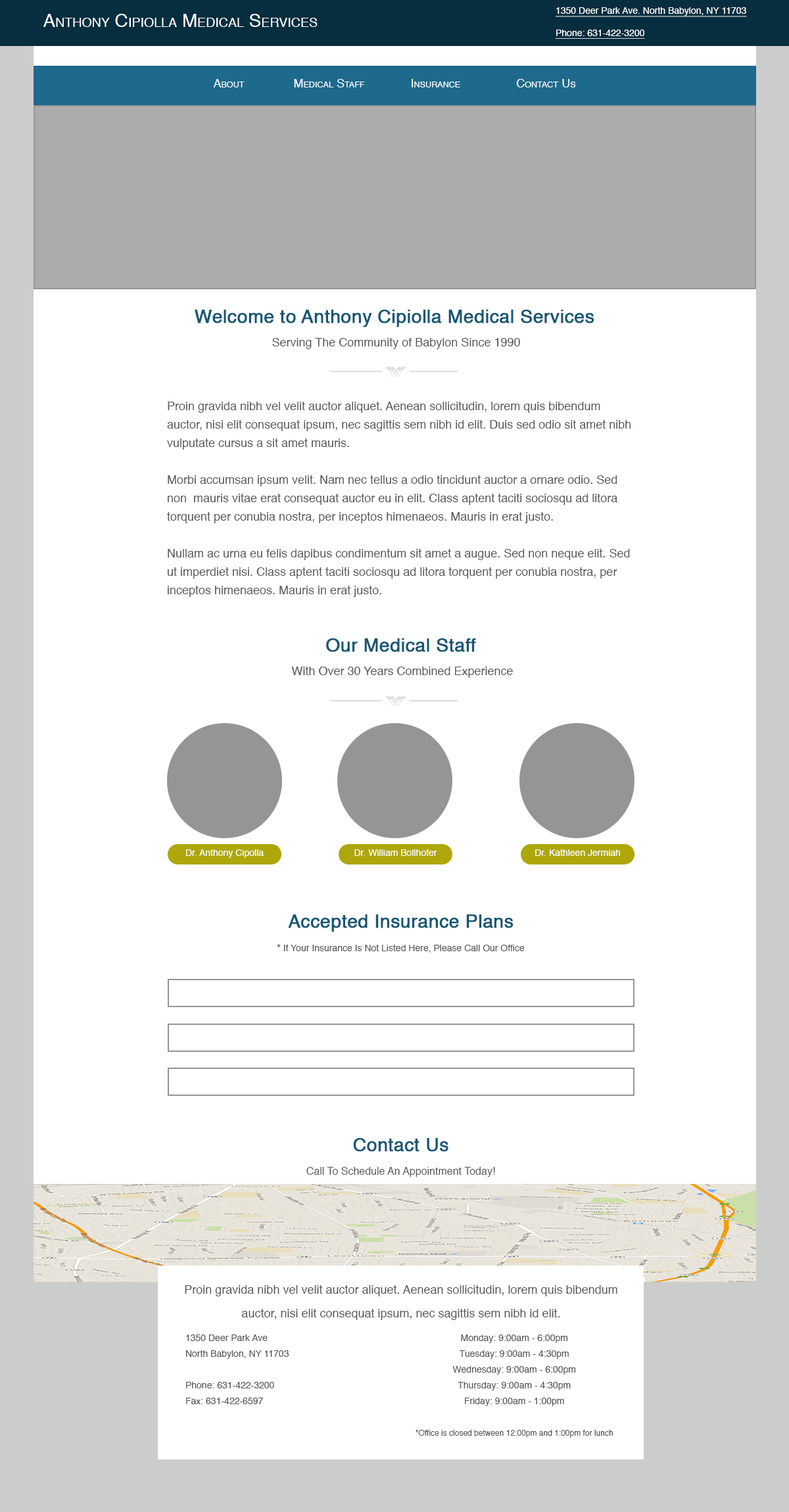
<style>
.page{position:relative;width:789px;height:1512px;background:#ffffff}
.page>*{position:absolute;margin:0}
.t1{font:18.4px "Helvetica";color:#ffffff;font-variant:small-caps}
.t2{font:9.2px "Helvetica";color:#ffffff;text-decoration:underline}
.t3{font:9.2px "Helvetica";color:#ffffff;text-transform:uppercase;text-decoration:underline}
.t4{font:11.8px "Helvetica";color:#ffffff;font-variant:small-caps}
.t5{font:18.4px "Helvetica";color:#165773;font-weight:bold}
.t6{font:15.8px "Helvetica";color:#575757}
.t7{font:11.8px/23.7px "Helvetica";color:#575757}
.t8{font:11.8px/18.4px "Helvetica";color:#575757}
.t9{font:9.2px "Helvetica";color:#ffffff}
.t10{font:9.2px/23.7px "Helvetica";color:#575757}
.t11{font:10.5px/23.7px "Helvetica";color:#575757}
.t12{font:9.2px/15.8px "Helvetica";color:#575757}
.t13{font:7.9px/15.8px "Helvetica";color:#575757}
</style>
<div class="page">
<p class="t1" style="left:43px;top:14px;width:274px;height:13px">Anthony Cipiolla Medical Services</p>
<p class="t2" style="left:555px;top:7px;width:192px;height:32px"><span class="t3">1350 </span>Deer Park Ave. North Babylon, NY 11703<br><br>Phone: 631-422-3200</p>
<p class="t4" style="left:213px;top:79px;width:363px;height:8px">About               Medical Staff              Insurance                 Contact Us</p>
<p class="t5" style="left:195px;top:310px;width:399px;height:39px;text-align:center"><span class="t6"><br></span>Welcome to Anthony Cipiolla Medical Services<br> <span class="t7">Serving The Community of Babylon Since 1990</span></p>
<p class="t8" style="left:167px;top:402px;width:464px;height:195px">Proin gravida nibh vel velit auctor aliquet. Aenean sollicitudin, lorem quis bibendum auctor, nisi elit consequat ipsum, nec sagittis sem nibh id elit. Duis sed odio sit amet nibh vulputate cursus a sit amet mauris. <br><br>Morbi accumsan ipsum velit. Nam nec tellus a odio tincidunt auctor a ornare odio. Sed non  mauris vitae erat consequat auctor eu in elit. Class aptent taciti sociosqu ad litora torquent per conubia nostra, per inceptos himenaeos. Mauris in erat justo. <br><br>Nullam ac urna eu felis dapibus condimentum sit amet a augue. Sed non neque elit. Sed ut imperdiet nisi. Class aptent taciti sociosqu ad litora torquent per conubia nostra, per inceptos himenaeos. Mauris in erat justo.</p>
<p class="t7" style="left:291px;top:638px;width:222px;height:40px;text-align:center"><span class="t5">Our Medical Staff<br> </span>With Over 30 Years Combined Experience</p>
<p class="t9" style="left:186px;top:849px;width:78px;height:9px">Dr. Anthony Cipolla</p>
<p class="t9" style="left:354px;top:849px;width:83px;height:7px">Dr. William Bollhofer</p>
<p class="t9" style="left:535px;top:849px;width:85px;height:7px">Dr. Kathleen Jermiah</p>
<p class="t10" style="left:277px;top:914px;width:248px;height:38px;text-align:center"><span class="t5">Accepted Insurance Plans<br></span>* If Your Insurance Is Not Listed Here, Please Call Our Office</p>
<p class="t11" style="left:306px;top:1138px;width:189px;height:39px;text-align:center"><span class="t5">Contact Us<br></span>Call To Schedule An Appointment Today!</p>
<p class="t7" style="left:185px;top:1285px;width:432px;height:35px;text-align:center">Proin gravida nibh vel velit auctor aliquet. Aenean sollicitudin, lorem quis bibendum auctor, nisi elit consequat ipsum, nec sagittis sem nibh id elit.</p>
<p class="t12" style="left:186px;top:1334px;width:103px;height:70px">1350 Deer Park Ave<br>North Babylon, NY 11703<br><br>Phone: 631-422-3200<br>Fax: 631-422-6597</p>
<p class="t12" style="left:415px;top:1334px;width:198px;height:104px;text-align:center">Monday: 9:00am - 6:00pm<br>Tuesday: 9:00am - 4:30pm<br>Wednesday: 9:00am - 6:00pm<br>Thursday: 9:00am - 4:30pm<br>Friday: 9:00am - 1:00pm<br><span class="t13"><br>*Office is closed between 12:00pm and 1:00pm for lunch</span></p>
</div>
